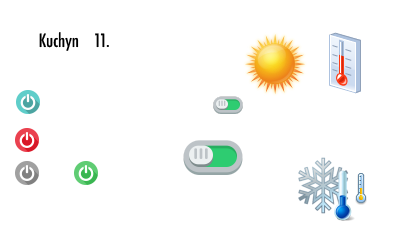
<style>
.page{position:relative;width:400px;height:240px;background:#ffffff}
.page>*{position:absolute;margin:0}
.t1{font:17.8px "Futura-CondensedMedium";color:#000000}
</style>
<div class="page">
<p class="t1" style="left:39px;top:32px;width:70px;height:19px">Kuchyn    11.</p>
</div>
